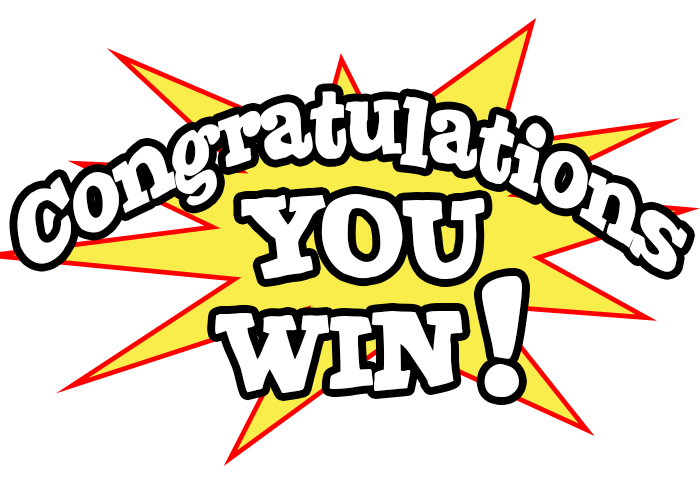
<style>
.page{position:relative;width:700px;height:500px;background:#ffffff}
.page>*{position:absolute;margin:0}
.t1{font:103.8px "JointbyPizzaDude";color:#ffffff;scale:0.72 1}
.t2{font:120.3px "JointbyPizzaDude";color:#ffffff}
</style>
<div class="page">
<p class="t1" style="left:17px;top:91px;width:670px;height:181px;text-align:center">Congratulations</p>
<p class="t2" style="left:241px;top:194px;width:244px;height:85px">YOU</p>
<p class="t2" style="left:482px;top:276px;width:40px;height:121px">!</p>
<p class="t2" style="left:215px;top:311px;width:248px;height:82px">WIN</p>
</div>
